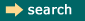
<style>
.page{position:relative;width:85px;height:21px;background:#006666}
.page>*{position:absolute;margin:0}
.t1{font:13px "Verdana";color:#ffffff;font-weight:bold}
</style>
<div class="page">
<p class="t1" style="left:28px;top:4px;width:44px;height:11px">search</p>
</div>
